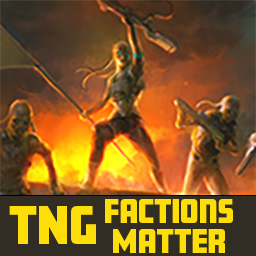
<style>
.page{position:relative;width:256px;height:256px}
.page>*{position:absolute;margin:0}
.t1{font:48px "Amboy-Black";color:#fede09}
.t2{font:30px/30px "Amboy-Black";color:#fede09}
</style>
<div class="page">
<p class="t1" style="left:9px;top:206px;width:87px;height:38px">TNG</p>
<p class="t2" style="left:105px;top:199px;width:128px;height:54px;text-align:center">Factions <br>Matter</p>
</div>
